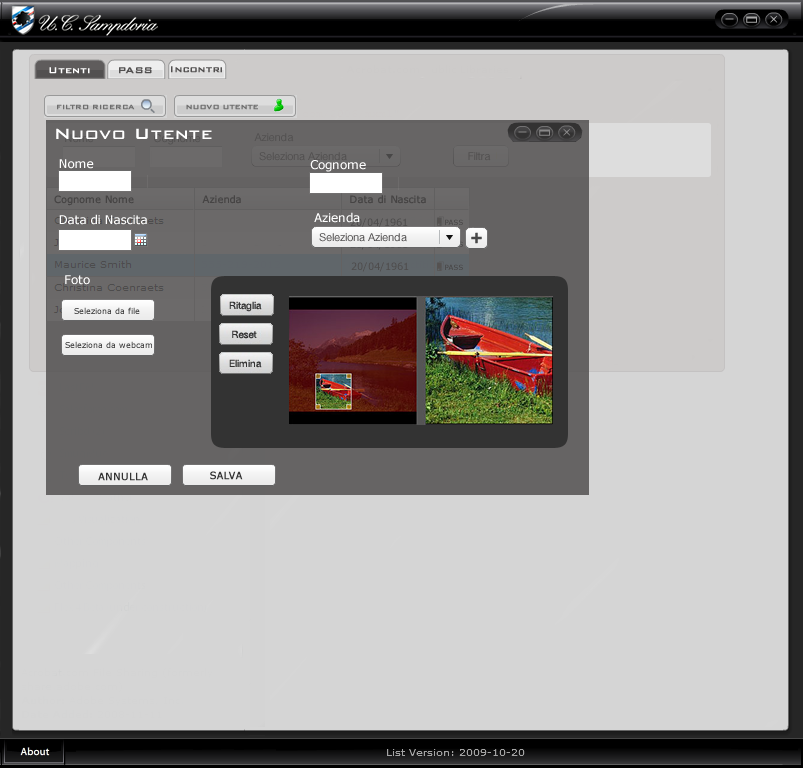
<style>
.page{position:relative;width:803px;height:768px;background:#d5d5d5}
.page>*{position:absolute;margin:0}
.t1{font:11px "BankGothicBT-Medium";color:#ffffff;font-weight:bold}
.t2{font:11px "BankGothicBT-Medium";color:#525050;font-weight:bold}
.t3{font:8px "BankGothicBT-Medium";color:#6e6e6e;font-weight:bold}
.t4{font:20px "BankGothicBT-Medium";color:#ffffff}
.t5{font:11px "HelveticaNeue-Roman";color:#525050}
.t6{font:12px "Verdana";color:#ffffff}
.t7{font:10px "Verdana";color:#464444}
.t8{font:10px "Verdana";color:#4d4c4c}
.t9{font:7px "Verdana"}
.t10{font:10px "HelveticaNeue-Roman";color:#333333}
.t11{font:8px "Verdana";color:#333333}
.t12{font:10px "Verdana";color:#333333;font-weight:bold}
</style>
<div class="page">
<p class="t1" style="left:49px;top:67px;width:41px;height:7px">Utenti</p>
<p class="t2" style="left:119px;top:67px;width:33px;height:7px">PASS</p>
<p class="t2" style="left:171px;top:66px;width:51px;height:7px">Incontri</p>
<p class="t3" style="left:57px;top:104px;width:78px;height:6px">FILTRO RICERCA</p>
<p class="t3" style="left:186px;top:104px;width:72px;height:6px">NUOVO UTENTE</p>
<p class="t4" style="left:56px;top:128px;width:156px;height:11px">Nuovo Utente</p>
<p class="t5" style="left:254px;top:133px;width:40px;height:9px">Azienda</p>
<p class="t6" style="left:59px;top:159px;width:35px;height:10px">Nome</p>
<p class="t5" style="left:259px;top:152px;width:88px;height:9px">Seleziona Azienda</p>
<p class="t6" style="left:310px;top:160px;width:56px;height:12px">Cognome</p>
<p class="t5" style="left:468px;top:152px;width:23px;height:9px">Filtra</p>
<p class="t7" style="left:54px;top:195px;width:80px;height:11px">Cognome Nome</p>
<p class="t7" style="left:202px;top:195px;width:39px;height:9px">Azienda</p>
<p class="t7" style="left:350px;top:195px;width:76px;height:9px">Data di Nascita</p>
<p class="t6" style="left:59px;top:214px;width:88px;height:11px">Data di Nascita</p>
<p class="t6" style="left:314px;top:212px;width:46px;height:11px">Azienda</p>
<p class="t8" style="left:350px;top:218px;width:58px;height:10px">20/04/1961</p>
<p class="t9" style="left:445px;top:219px;width:18px;height:6px">PASS</p>
<p class="t5" style="left:319px;top:233px;width:88px;height:9px">Seleziona Azienda</p>
<p class="t8" style="left:351px;top:262px;width:58px;height:10px">20/04/1961</p>
<p class="t9" style="left:445px;top:264px;width:18px;height:6px">PASS</p>
<p class="t6" style="left:65px;top:275px;width:25px;height:10px">Foto</p>
<p class="t10" style="left:229px;top:301px;width:33px;height:11px">Ritaglia</p>
<p class="t11" style="left:74px;top:307px;width:66px;height:7px">Seleziona da file</p>
<p class="t11" style="left:65px;top:341px;width:87px;height:7px">Seleziona da webcam</p>
<p class="t10" style="left:232px;top:330px;width:25px;height:9px">Reset</p>
<p class="t10" style="left:229px;top:359px;width:33px;height:9px">Elimina</p>
<p class="t12" style="left:98px;top:472px;width:50px;height:9px">ANNULLA</p>
<p class="t12" style="left:210px;top:471px;width:33px;height:9px">SALVA</p>
</div>
